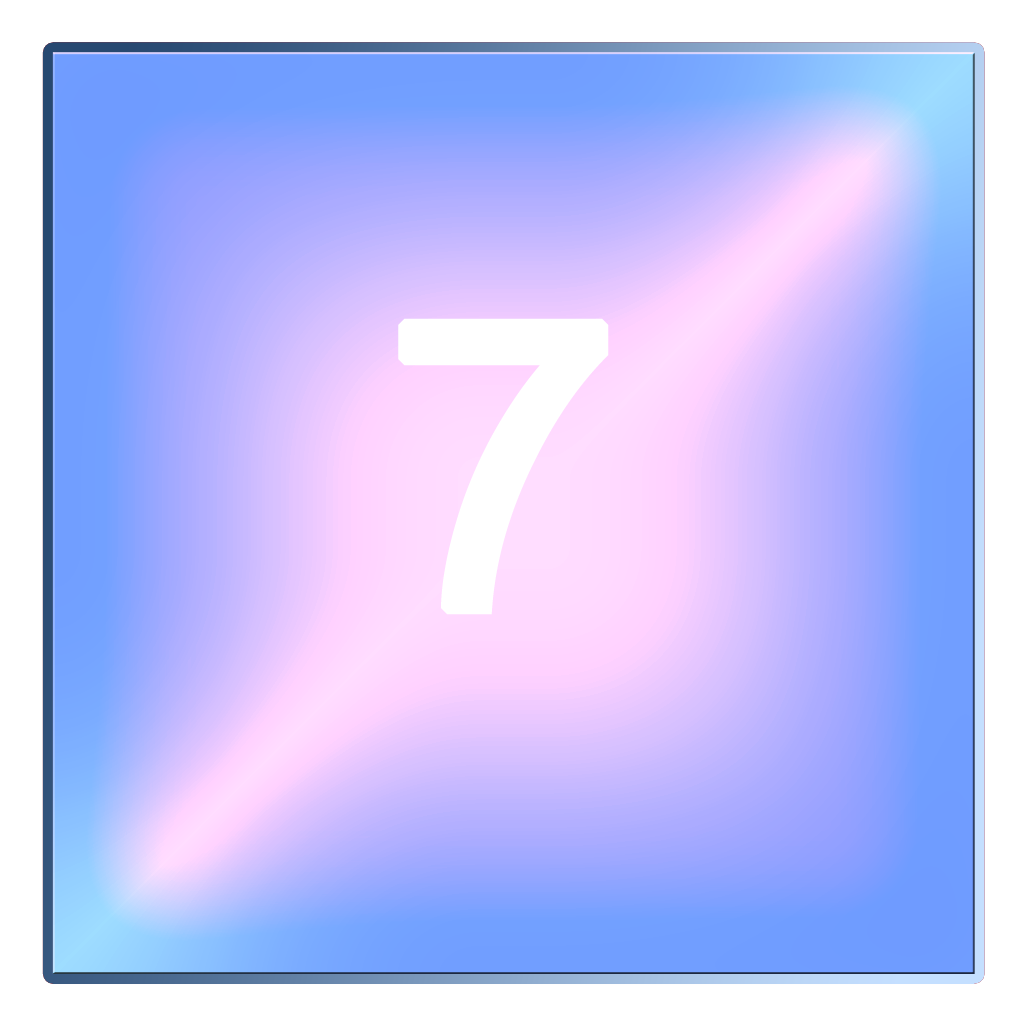
<style>
.page{position:relative;width:1024px;height:1024px}
.page>*{position:absolute;margin:0}
.t1{font:400px "ArialNarrow";color:#ffffff;font-weight:bold;scale:1.3 1}
</style>
<div class="page">
<p class="t1" style="left:398px;top:318px;width:211px;height:297px">7</p>
</div>
